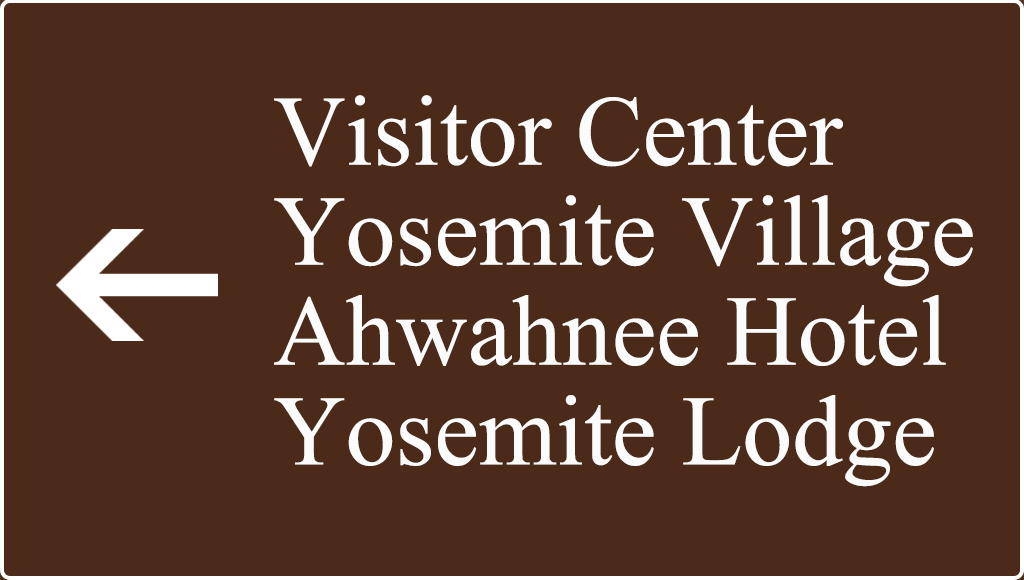
<style>
.page{position:relative;width:1024px;height:580px;background:#4c2a19}
.page>*{position:absolute;margin:0}
.t1{font:99.9px/99.9px "IskoolaPota";color:#fbfbfb}
</style>
<div class="page">
<p class="t1" style="left:274px;top:95px;width:699px;height:392px">Visitor Center<br>Yosemite Village<br>Ahwahnee Hotel<br>Yosemite Lodge</p>
</div>
